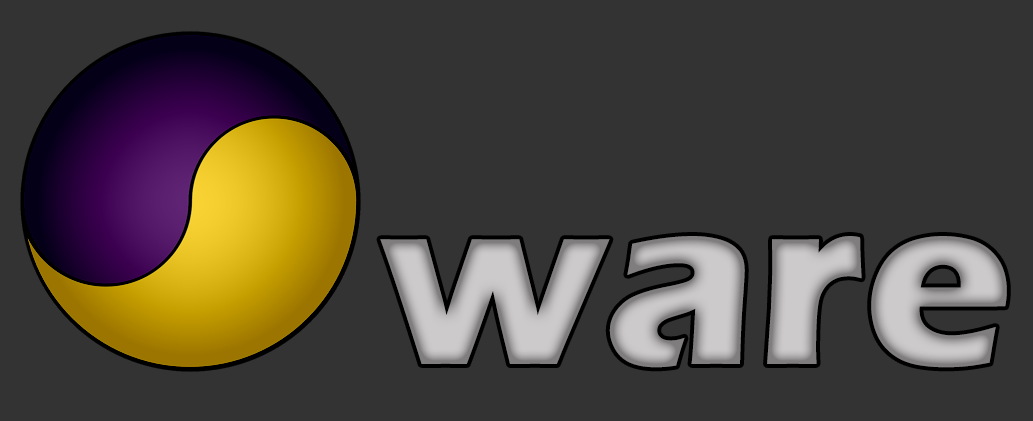
<style>
.page{position:relative;width:1033px;height:421px;background:#333333}
.page>*{position:absolute;margin:0}
.t1{font:250px "ErasITC-Bold"}
</style>
<div class="page">
<p class="t1" style="left:380px;top:236px;width:627px;height:132px">ware</p>
</div>
